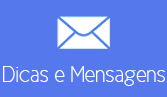
<style>
.page{position:relative;width:167px;height:97px;background:#5579ec}
.page>*{position:absolute;margin:0}
.t1{font:22.7px "CicleFina";color:#ffffff}
</style>
<div class="page">
<p class="t1" style="left:3px;top:66px;width:162px;height:20px">Dicas e Mensagens</p>
</div>
